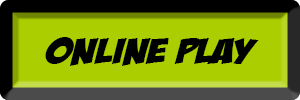
<style>
.page{position:relative;width:300px;height:100px;background:#aace00}
.page>*{position:absolute;margin:0}
.t1{font:35.4px "BadaBoomBB";color:#000000;scale:1.47 1}
</style>
<div class="page">
<p class="t1" style="left:45px;top:37px;width:214px;height:29px">ONLINE PLAY</p>
</div>
